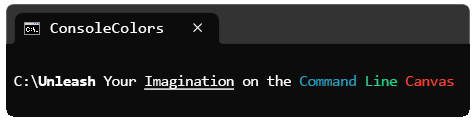
<style>
.page{position:relative;width:476px;height:123px;background:#0c0c0c}
.page>*{position:absolute;margin:0}
.t1{font:16px "Consolas";color:#ffffff}
.t2{font:16px "Consolas";letter-spacing:-0.04em;color:#ffffff;text-decoration:underline}
.t3{font:16px "Consolas";letter-spacing:-0.04em;color:#ffffff}
.t4{font:16px "Consolas-Bold";letter-spacing:-0.04em;color:#ffffff}
.t5{font:16px "Consolas";letter-spacing:-0.04em;color:#229fbf}
.t6{font:16px "Consolas";letter-spacing:-0.04em;color:#1ed18b}
.t7{font:16px "Consolas";letter-spacing:-0.04em;color:#f1402d}
</style>
<div class="page">
<p class="t1" style="left:50px;top:22px;width:113px;height:11px">ConsoleColors</p>
<p class="t2" style="left:14px;top:75px;width:440px;height:15px"><span class="t3">C:\</span><span class="t4">Unleash</span><span class="t3"> Your </span>Imagination<span class="t3"> on the </span><span class="t5">Command </span><span class="t6">Line </span><span class="t7">Canvas</span></p>
</div>
